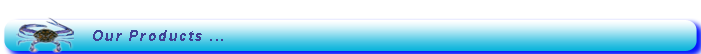
<style>
.page{position:relative;width:701px;height:54px;background:#ffffff}
.page>*{position:absolute;margin:0}
.t1{font:14.8px "Arial-BoldMT";letter-spacing:0.1em;color:#3e4095;font-style:italic}
</style>
<div class="page">
<p class="t1" style="left:93px;top:30px;width:130px;height:11px">Our Products ...</p>
</div>
